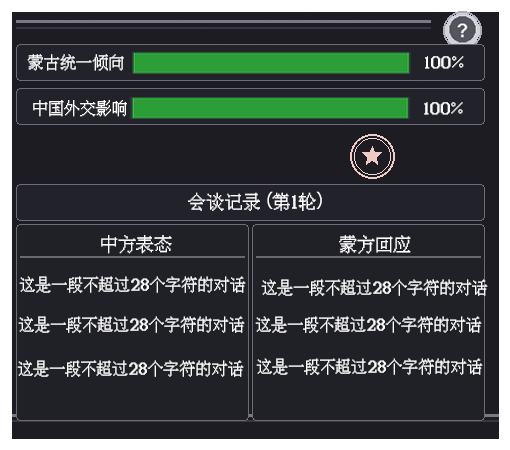
<style>
.page{position:relative;width:510px;height:450px;background:#202027}
.page>*{position:absolute;margin:0}
.t1{font:16px "IPix";color:#ffffff}
.t2{font:18px "IPix";color:#ffffff}
.t3{font:18px "AdobeHeitiStd-Regular";color:#ffffff}
</style>
<div class="page">
<p class="t1" style="left:27px;top:54px;width:97px;height:17px">蒙古统一倾向</p>
<p class="t1" style="left:425px;top:56px;width:39px;height:13px">100%</p>
<p class="t1" style="left:33px;top:100px;width:94px;height:17px">中国外交影响</p>
<p class="t1" style="left:424px;top:102px;width:39px;height:13px">100%</p>
<p class="t2" style="left:188px;top:191px;width:134px;height:20px">会谈记录<span class="t3">（</span>第1轮<span class="t3">）</span></p>
<p class="t2" style="left:101px;top:235px;width:71px;height:19px">中方表态</p>
<p class="t2" style="left:339px;top:235px;width:72px;height:19px">蒙方回应</p>
<p class="t1" style="left:19px;top:276px;width:227px;height:17px">这是一段不超过28个字符的对话</p>
<p class="t1" style="left:261px;top:279px;width:227px;height:17px">这是一段不超过28个字符的对话</p>
<p class="t1" style="left:18px;top:316px;width:227px;height:17px">这是一段不超过28个字符的对话</p>
<p class="t1" style="left:255px;top:316px;width:227px;height:17px">这是一段不超过28个字符的对话</p>
<p class="t1" style="left:17px;top:360px;width:227px;height:17px">这是一段不超过28个字符的对话</p>
<p class="t1" style="left:256px;top:358px;width:227px;height:17px">这是一段不超过28个字符的对话</p>
</div>
